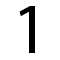
<style>
.page{position:relative;width:60px;height:60px;background:#ffffff}
.page>*{position:absolute;margin:0}
.t1{font:72px "MyriadPro-Regular";color:#000000}
</style>
<div class="page">
<p class="t1" style="left:19px;top:6px;width:16px;height:47px">1</p>
</div>
